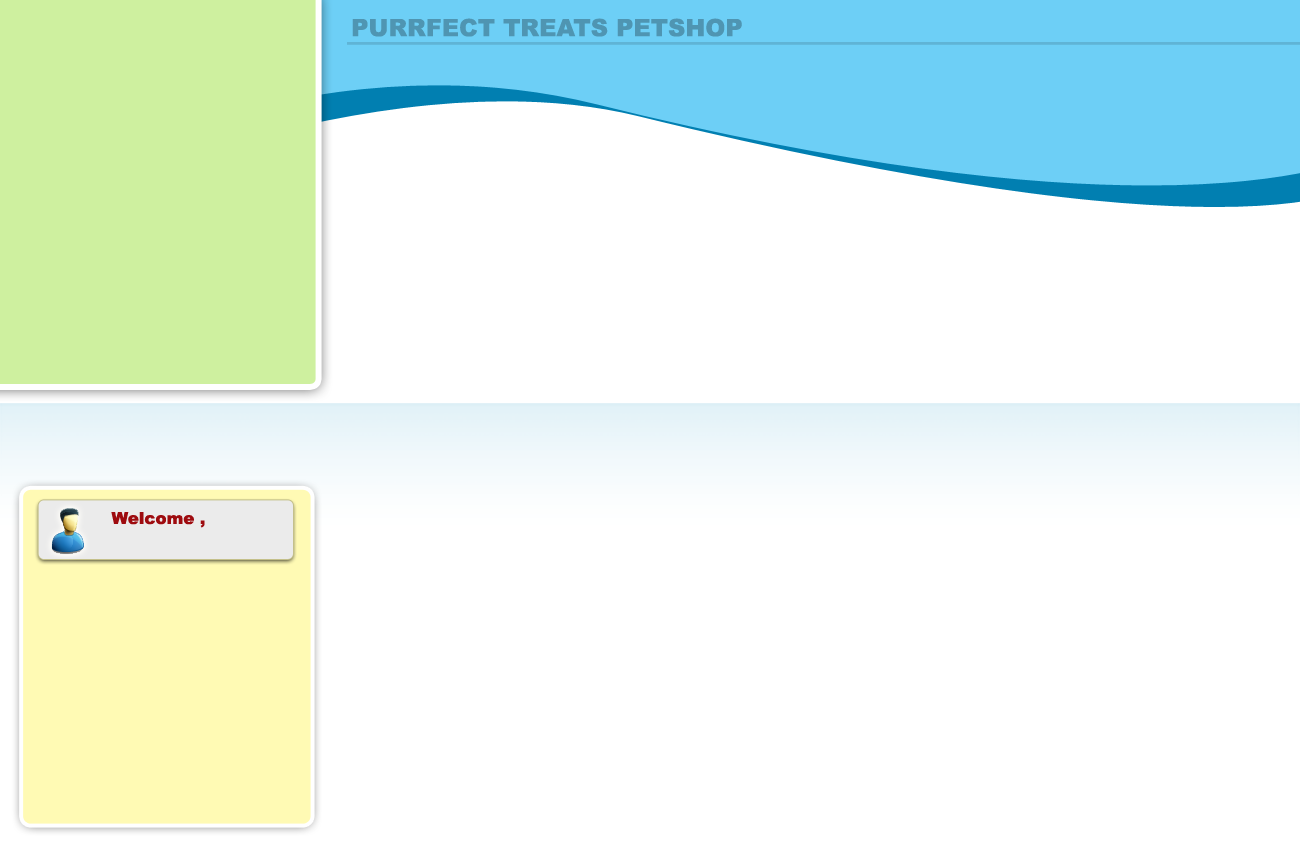
<style>
.page{position:relative;width:1300px;height:867px;background:#ffffff}
.page>*{position:absolute;margin:0}
.t1{font:24px "Arial-Black";color:#4f95b2}
.t2{font:16.7px "Arial-Black";color:#9e0b0f}
</style>
<div class="page">
<p class="t1" style="left:352px;top:18px;width:390px;height:19px">PURRFECT TREATS PETSHOP</p>
<p class="t2" style="left:111px;top:512px;width:94px;height:16px">Welcome ,</p>
</div>
